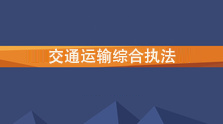
<style>
.page{position:relative;width:223px;height:124px;background:#394873}
.page>*{position:absolute;margin:0}
.t1{font:16px "AdobeHeitiStd-Regular";color:#f8f5e4}
</style>
<div class="page">
<p class="t1" style="left:49px;top:48px;width:127px;height:16px">交通运输综合执法</p>
</div>
